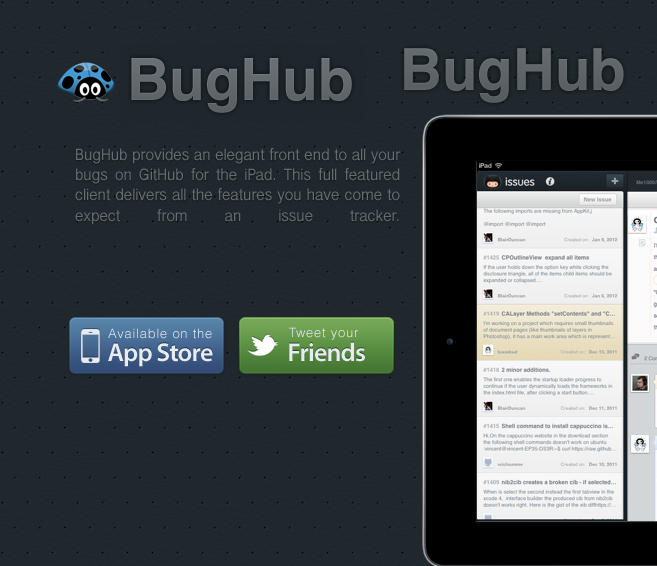
<style>
.page{position:relative;width:657px;height:566px}
.page>*{position:absolute;margin:0}
.t1{font:58px "Helvetica-Bold";color:#646b6f}
.t2{font:17px "InaiMathi";color:#666d72}
.t3{font:13px "Helvetica-Light";letter-spacing:0.058em;color:#e6ecf2}
.t4{font:26px "MyriadPro-Semibold";letter-spacing:-0.027em;color:#e6ecf2}
</style>
<div class="page">
<p class="t1" style="left:404px;top:48px;width:220px;height:55px">BugHub</p>
<p class="t2" style="left:75px;top:148px;width:326px;height:77px;text-align:justify">BugHub provides an elegant front end to all your bugs on GitHub for the iPad. This full featured client delivers all the features you have come to expect from an issue tracker.</p>
<p class="t3" style="left:108px;top:328px;width:104px;height:11px">Available on the</p>
<p class="t3" style="left:289px;top:327px;width:69px;height:13px">Tweet your</p>
<p class="t4" style="left:289px;top:342px;width:76px;height:20px">Friends</p>
<p class="t4" style="left:108px;top:343px;width:105px;height:24px">App Store</p>
</div>
